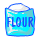
<style>
.page{position:relative;width:40px;height:40px;background:#ffffff}
.page>*{position:absolute;margin:0}
.t1{font:13.8px "DomCasualBT-Regular";letter-spacing:0.055em;color:#184eff;scale:0.79 1}
</style>
<div class="page">
<p class="t1" style="left:7px;top:17px;width:27px;height:10px">FLOUR</p>
</div>
